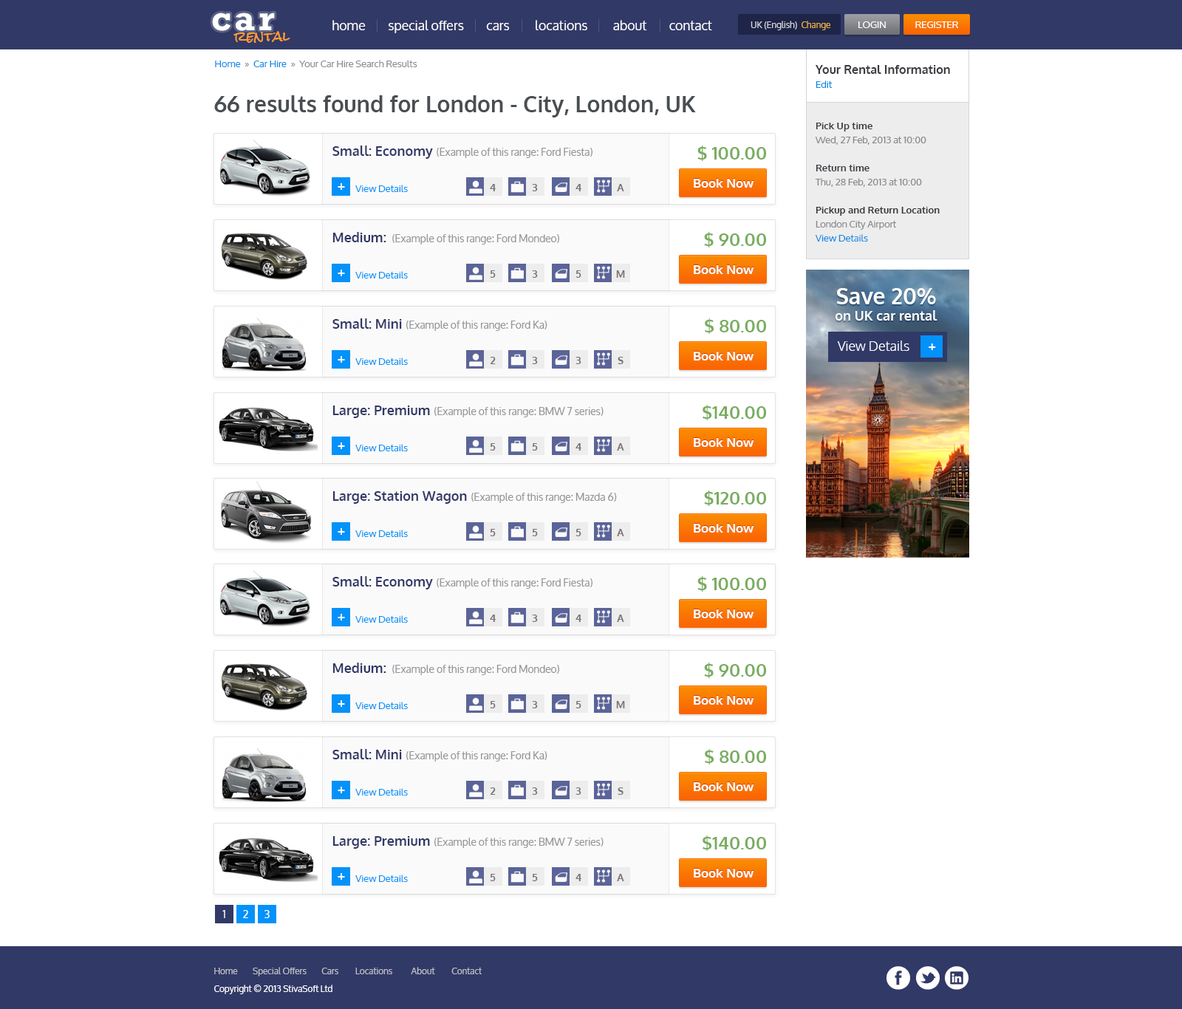
<style>
.page{position:relative;width:1182px;height:1009px;background:#ffffff}
.page>*{position:absolute;margin:0}
.t1{font:35.5px "Rockwell-Bold";letter-spacing:0.1em;color:#ffffff}
.t2{font:13.3px "Oxygen";color:#ffffff}
.t3{font:8.9px "Oxygen";color:#d4d4d7}
.t4{font:8.9px "Oxygen";color:#e7ae40}
.t5{font:9.6px "Oxygen";color:#ffffff;text-transform:uppercase}
.t6{font:13.3px "RockSalt";color:#ff9b2f}
.t7{font:9.6px "Oxygen";color:#888b91}
.t8{font:9.6px "Oxygen";color:#0e8be5}
.t9{font:11.8px "Oxygen-Bold";color:#3a3c41}
.t10{font:9.6px/14px "Oxygen";color:#0e8be5}
.t11{font:22.2px "Oxygen-Bold";color:#494e52}
.t12{font:9.6px/14px "Oxygen";color:#89898d}
.t13{font:9.6px "Oxygen-Bold";color:#3a3c41}
.t14{font:9.6px/14px "Oxygen-Bold";color:#3a3c41}
.t15{font:9.6px/14px "Oxygen-Bold";color:#333435}
.t16{font:10.3px "Oxygen";color:#939698}
.t17{font:13.3px "Oxygen-Bold";color:#313967}
.t18{font:17.7px "Oxygen-Bold";color:#79ad60}
.t19{font:13.3px "Oxygen-Bold";color:#ffffff}
.t20{font:9.6px "Oxygen";color:#0392fa}
.t21{font:10.3px "Oxygen-Bold";color:#7b7474}
.t22{font:12.6px "Oxygen-Bold";color:#ffffff}
.t23{font:22.2px "Oxygen-Bold";color:#ffffff}
.t24{font:13.3px "Oxygen-Light";color:#ffffff}
.t25{font:10.3px "Oxygen";color:#ffffff}
.t26{font:8.9px "Oxygen";color:#bfc0c6}
.t27{font:8.9px/17.7px "Oxygen";color:#ffffff}
</style>
<div class="page">
<p class="t1" style="left:212px;top:13px;width:63px;height:18px">car</p>
<p class="t2" style="left:332px;top:20px;width:380px;height:13px">home        special offers        cars         locations         about        contact</p>
<p class="t3" style="left:750px;top:21px;width:80px;height:9px">UK (English)  <span class="t4">Change</span></p>
<p class="t5" style="left:858px;top:21px;width:28px;height:7px">Login</p>
<p class="t5" style="left:915px;top:21px;width:43px;height:7px">Register</p>
<p class="t6" style="left:233px;top:31px;width:57px;height:12px">rental</p>
<p class="t7" style="left:215px;top:60px;width:202px;height:7px"><span class="t8"> Home</span>  » <span class="t8"> Car Hire  </span>»  Your Car Hire Search Results</p>
<p class="t9" style="left:815px;top:65px;width:135px;height:23px">Your Rental Information<br><span class="t10">Edit</span></p>
<p class="t11" style="left:214px;top:95px;width:482px;height:22px">66 results found for London - City, London, UK</p>
<p class="t12" style="left:815px;top:123px;width:125px;height:119px"><span class="t13">Pick Up time <br></span>Wed, 27 Feb, 2013 at 10:00<br><span class="t14"><br>Return time <br></span>Thu, 28 Feb, 2013 at 10:00<br><br><span class="t15">Pickup and Return Location<br></span>London City Airport <br><span class="t10">View Details</span></p>
<p class="t16" style="left:332px;top:146px;width:260px;height:13px"><span class="t17">Small: Economy </span>(Example of this range: Ford Fiesta)</p>
<p class="t18" style="left:697px;top:146px;width:69px;height:15px">$ 100.00</p>
<p class="t19" style="left:338px;top:183px;width:7px;height:7px">+</p>
<p class="t20" style="left:355px;top:185px;width:53px;height:7px">View Details</p>
<p class="t21" style="left:490px;top:184px;width:6px;height:7px">4</p>
<p class="t21" style="left:532px;top:184px;width:6px;height:7px">3</p>
<p class="t21" style="left:575px;top:184px;width:6px;height:7px">4</p>
<p class="t21" style="left:617px;top:184px;width:7px;height:7px">A</p>
<p class="t22" style="left:694px;top:179px;width:60px;height:9px">Book Now</p>
<p class="t16" style="left:332px;top:232px;width:227px;height:12px"><span class="t17">Medium: </span> (Example of this range: Ford Mondeo)</p>
<p class="t18" style="left:704px;top:232px;width:62px;height:15px">$ 90.00</p>
<p class="t19" style="left:338px;top:270px;width:7px;height:6px">+</p>
<p class="t22" style="left:694px;top:265px;width:60px;height:9px">Book Now</p>
<p class="t20" style="left:355px;top:271px;width:53px;height:7px">View Details</p>
<p class="t21" style="left:490px;top:270px;width:6px;height:8px">5</p>
<p class="t21" style="left:532px;top:270px;width:6px;height:8px">3</p>
<p class="t21" style="left:575px;top:270px;width:6px;height:8px">5</p>
<p class="t21" style="left:616px;top:270px;width:9px;height:8px">M</p>
<p class="t19" style="left:835px;top:288px;width:102px;height:33px;text-align:center"><span class="t23">Save 20% <br></span>on UK car rental</p>
<p class="t16" style="left:332px;top:318px;width:215px;height:13px"><span class="t17">Small: Mini </span>(Example of this range: Ford Ka)</p>
<p class="t18" style="left:705px;top:318px;width:61px;height:16px">$ 80.00</p>
<p class="t24" style="left:837px;top:341px;width:99px;height:10px">View Details     <span class="t19"> +</span></p>
<p class="t22" style="left:694px;top:352px;width:60px;height:8px">Book Now</p>
<p class="t19" style="left:338px;top:356px;width:7px;height:7px">+</p>
<p class="t20" style="left:355px;top:358px;width:53px;height:7px">View Details</p>
<p class="t21" style="left:490px;top:357px;width:6px;height:7px">2</p>
<p class="t21" style="left:532px;top:357px;width:6px;height:7px">3</p>
<p class="t21" style="left:575px;top:357px;width:6px;height:7px">3</p>
<p class="t21" style="left:618px;top:357px;width:5px;height:7px">S</p>
<p class="t16" style="left:332px;top:406px;width:271px;height:12px"><span class="t17">Large: Premium </span>(Example of this range: BMW 7 series)</p>
<p class="t18" style="left:702px;top:405px;width:64px;height:15px">$140.00</p>
<p class="t19" style="left:338px;top:442px;width:7px;height:7px">+</p>
<p class="t20" style="left:355px;top:444px;width:53px;height:7px">View Details</p>
<p class="t21" style="left:490px;top:443px;width:6px;height:8px">5</p>
<p class="t21" style="left:532px;top:443px;width:6px;height:8px">5</p>
<p class="t21" style="left:575px;top:443px;width:6px;height:8px">4</p>
<p class="t21" style="left:617px;top:443px;width:7px;height:8px">A</p>
<p class="t22" style="left:694px;top:438px;width:60px;height:9px">Book Now</p>
<p class="t16" style="left:332px;top:491px;width:285px;height:13px"><span class="t17">Large: Station Wagon </span>(Example of this range: Mazda 6)</p>
<p class="t18" style="left:704px;top:490px;width:62px;height:16px">$120.00</p>
<p class="t19" style="left:338px;top:528px;width:7px;height:7px">+</p>
<p class="t20" style="left:355px;top:530px;width:53px;height:7px">View Details</p>
<p class="t21" style="left:490px;top:529px;width:6px;height:7px">5</p>
<p class="t21" style="left:532px;top:529px;width:6px;height:7px">5</p>
<p class="t21" style="left:575px;top:529px;width:6px;height:7px">5</p>
<p class="t21" style="left:617px;top:529px;width:7px;height:7px">A</p>
<p class="t22" style="left:694px;top:524px;width:60px;height:9px">Book Now</p>
<p class="t16" style="left:332px;top:576px;width:260px;height:13px"><span class="t17">Small: Economy </span>(Example of this range: Ford Fiesta)</p>
<p class="t18" style="left:697px;top:576px;width:69px;height:16px">$ 100.00</p>
<p class="t19" style="left:338px;top:614px;width:7px;height:6px">+</p>
<p class="t20" style="left:355px;top:615px;width:53px;height:8px">View Details</p>
<p class="t21" style="left:490px;top:615px;width:6px;height:7px">4</p>
<p class="t21" style="left:532px;top:615px;width:6px;height:7px">3</p>
<p class="t21" style="left:575px;top:615px;width:6px;height:7px">4</p>
<p class="t21" style="left:617px;top:615px;width:7px;height:7px">A</p>
<p class="t22" style="left:694px;top:609px;width:60px;height:9px">Book Now</p>
<p class="t16" style="left:332px;top:663px;width:227px;height:12px"><span class="t17">Medium: </span> (Example of this range: Ford Mondeo)</p>
<p class="t18" style="left:704px;top:663px;width:62px;height:15px">$ 90.00</p>
<p class="t19" style="left:338px;top:700px;width:7px;height:7px">+</p>
<p class="t20" style="left:355px;top:702px;width:53px;height:7px">View Details</p>
<p class="t21" style="left:490px;top:701px;width:6px;height:7px">5</p>
<p class="t21" style="left:532px;top:701px;width:6px;height:7px">3</p>
<p class="t21" style="left:575px;top:701px;width:6px;height:7px">5</p>
<p class="t21" style="left:616px;top:701px;width:9px;height:7px">M</p>
<p class="t22" style="left:694px;top:696px;width:60px;height:9px">Book Now</p>
<p class="t16" style="left:332px;top:749px;width:215px;height:13px"><span class="t17">Small: Mini </span>(Example of this range: Ford Ka)</p>
<p class="t18" style="left:705px;top:749px;width:61px;height:15px">$ 80.00</p>
<p class="t22" style="left:694px;top:782px;width:60px;height:9px">Book Now</p>
<p class="t19" style="left:338px;top:787px;width:7px;height:6px">+</p>
<p class="t20" style="left:355px;top:788px;width:53px;height:8px">View Details</p>
<p class="t21" style="left:490px;top:787px;width:6px;height:8px">2</p>
<p class="t21" style="left:532px;top:787px;width:6px;height:8px">3</p>
<p class="t21" style="left:575px;top:787px;width:6px;height:8px">3</p>
<p class="t21" style="left:618px;top:787px;width:5px;height:8px">S</p>
<p class="t16" style="left:332px;top:836px;width:271px;height:13px"><span class="t17">Large: Premium </span>(Example of this range: BMW 7 series)</p>
<p class="t18" style="left:702px;top:835px;width:64px;height:16px">$140.00</p>
<p class="t22" style="left:694px;top:869px;width:60px;height:9px">Book Now</p>
<p class="t19" style="left:338px;top:873px;width:7px;height:7px">+</p>
<p class="t20" style="left:355px;top:875px;width:53px;height:7px">View Details</p>
<p class="t21" style="left:490px;top:874px;width:6px;height:7px">5</p>
<p class="t21" style="left:532px;top:874px;width:6px;height:7px">5</p>
<p class="t21" style="left:575px;top:874px;width:6px;height:7px">4</p>
<p class="t21" style="left:617px;top:874px;width:7px;height:7px">A</p>
<p class="t25" style="left:222px;top:910px;width:3px;height:8px">1</p>
<p class="t25" style="left:243px;top:910px;width:5px;height:8px">2</p>
<p class="t25" style="left:264px;top:910px;width:6px;height:8px">3</p>
<p class="t26" style="left:214px;top:967px;width:268px;height:27px">Home        Special Offers        Cars         Locations          About         Contact<br><span class="t27">Copyright © 2013 StivaSoft Ltd</span></p>
</div>
